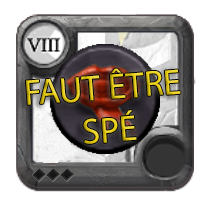
<style>
.page{position:relative;width:217px;height:217px;background:#ffffff}
.page>*{position:absolute;margin:0}
.t1{font:36px "MyriadPro-Regular"}
</style>
<div class="page">
<p class="t1" style="left:25px;top:68px;width:156px;height:76px;text-align:center;rotate:-4deg">FAUT ÊTRE<br> SPÉ</p>
</div>
